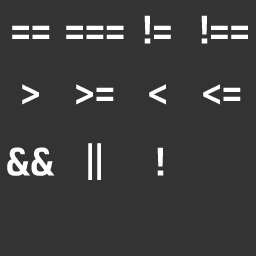
<style>
.page{position:relative;width:256px;height:256px;background:#333333}
.page>*{position:absolute;margin:0}
.t1{font:38px "Moire-Bold";color:#ffffff;scale:0.85 1}
</style>
<div class="page">
<p class="t1" style="left:144px;top:15px;width:27px;height:29px">!=</p>
<p class="t1" style="left:201px;top:15px;width:47px;height:29px">!==</p>
<p class="t1" style="left:12px;top:25px;width:38px;height:14px">==</p>
<p class="t1" style="left:66px;top:25px;width:58px;height:14px">===</p>
<p class="t1" style="left:22px;top:84px;width:17px;height:21px">&gt;</p>
<p class="t1" style="left:76px;top:84px;width:38px;height:21px">&gt;=</p>
<p class="t1" style="left:149px;top:84px;width:17px;height:21px">&lt;</p>
<p class="t1" style="left:203px;top:84px;width:38px;height:21px">&lt;=</p>
<p class="t1" style="left:7px;top:147px;width:48px;height:29px">&amp;&amp;</p>
<p class="t1" style="left:88px;top:143px;width:13px;height:37px">||</p>
<p class="t1" style="left:157px;top:147px;width:7px;height:29px">!</p>
</div>
